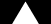
<style>
.page{position:relative;width:51px;height:24px;background:#000000}
.page>*{position:absolute;margin:0}
.t1{font:31.8px "MS-Gothic";color:#ffffff}
</style>
<div class="page">
<p class="t1" style="left:12px;top:1px;width:27px;height:23px">▲</p>
</div>
